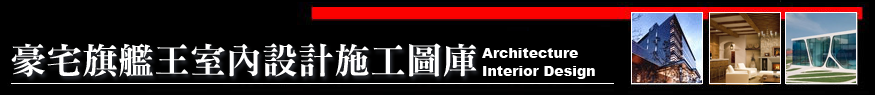
<style>
.page{position:relative;width:875px;height:95px;background:#000000}
.page>*{position:absolute;margin:0}
.t1{font:36px "DFNMing-XB-HK-BF";color:#ffffff}
.t2{font:14px "Arial-Black";color:#ffffff}
</style>
<div class="page">
<p class="t1" style="left:11px;top:43px;width:466px;height:34px">豪宅旗艦王室內設計施工圖庫</p>
<p class="t2" style="left:482px;top:48px;width:96px;height:10px">Architecture</p>
<p class="t2" style="left:483px;top:66px;width:112px;height:13px">Interior Design</p>
</div>
